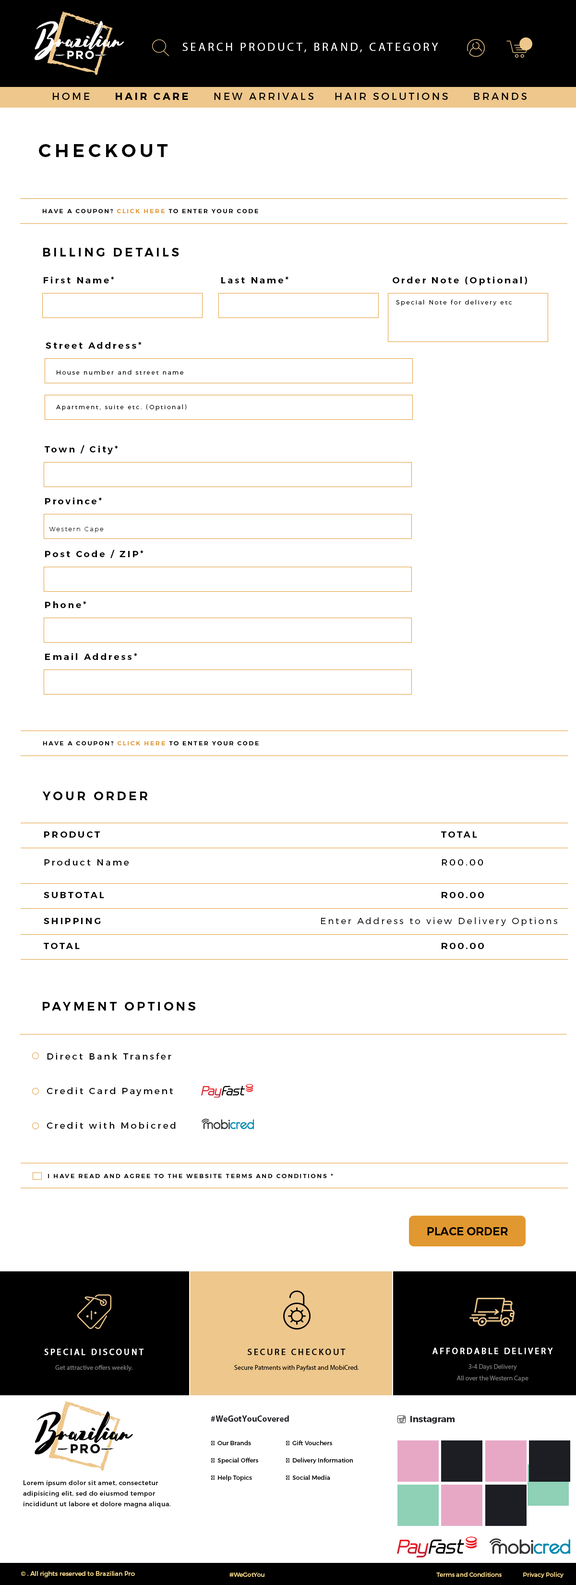
<style>
.page{position:relative;width:576px;height:1585px;background:#ffffff}
.page>*{position:absolute;margin:0}
.t1{font:11.6px "MyriadPro-Regular";letter-spacing:0.2em;color:#ffffff;text-transform:uppercase}
.t2{font:10px "Montserrat-Regular";letter-spacing:0.2em;color:#000000;text-transform:uppercase}
.t3{font:10px "Montserrat-Bold";letter-spacing:0.2em;color:#000000;text-transform:uppercase}
.t4{font:18.2px "Montserrat-SemiBold";letter-spacing:0.2em;color:#000000;text-transform:uppercase}
.t5{font:6px "Montserrat-SemiBold";letter-spacing:0.2em;color:#000000;text-transform:uppercase}
.t6{font:6px "Montserrat-SemiBold";letter-spacing:0.2em;color:#e19830;text-transform:uppercase}
.t7{font:12px "Montserrat-SemiBold";letter-spacing:0.2em;color:#000000;text-transform:uppercase}
.t8{font:9px "Montserrat-SemiBold";letter-spacing:0.2em;color:#000000}
.t9{font:9px "Montserrat-SemiBold";letter-spacing:0.2em;color:#000000;text-transform:uppercase}
.t10{font:6px "Montserrat-Light";letter-spacing:0.2em;color:#000000}
.t11{font:6px "Montserrat-UltraLight";letter-spacing:0.2em;color:#000000}
.t12{font:9px "Montserrat-Regular";letter-spacing:0.2em;color:#000000}
.t13{font:9px "Montserrat-Light";letter-spacing:0.2em;color:#000000}
.t14{font:9px/11.5px "Montserrat-Regular";letter-spacing:0.2em;color:#000000}
.t15{font:11.1px "Montserrat-SemiBold";color:#000000;text-transform:uppercase}
.t16{font:8.6px "MyriadPro-Regular";letter-spacing:0.2em;color:#ffffff;font-weight:bold}
.t17{font:8.6px "MyriadPro-Regular";letter-spacing:0.2em;color:#000000;font-weight:bold}
.t18{font:6.7px "MyriadPro-Regular";color:#767676}
.t19{font:6.7px "MyriadPro-Regular";color:#000000}
.t20{font:6.7px/11.5px "MyriadPro-Regular";color:#767676}
.t21{font:8.6px "MyriadPro-Bold";color:#1d1e24}
.t22{font:8.6px "Montserrat-Bold";color:#1d1e24}
.t23{font:6.2px/10.6px "Montserrat-Regular";letter-spacing:0.04em;color:#000000}
.t24{font:6.2px "Montserrat-Regular";color:#f5d78a}
.t25{font:6px "Montserrat-Regular";color:#f5d78a}
</style>
<div class="page">
<p class="t1" style="left:182px;top:43px;width:256px;height:9px">Search product, brand, category</p>
<p class="t2" style="left:53px;top:93px;width:474px;height:7px">Home     <span class="t3">hair care</span>     new arrivals    hair solutions     brands</p>
<p class="t4" style="left:39px;top:144px;width:129px;height:13px">checkout</p>
<p class="t5" style="left:42px;top:209px;width:216px;height:4px">Have a coupon? <span class="t6">Click here</span> to enter your code</p>
<p class="t7" style="left:43px;top:248px;width:136px;height:8px">BILLING DETAILS</p>
<p class="t8" style="left:44px;top:276px;width:70px;height:7px">First Name<span class="t9">*</span></p>
<p class="t8" style="left:221px;top:276px;width:68px;height:7px">Last Name*</p>
<p class="t8" style="left:393px;top:276px;width:134px;height:9px">Order Note (Optional)</p>
<p class="t10" style="left:396px;top:300px;width:116px;height:6px">Special Note for delivery etc</p>
<p class="t8" style="left:46px;top:341px;width:96px;height:8px">Street Address*</p>
<p class="t10" style="left:57px;top:370px;width:126px;height:5px">House number and street name</p>
<p class="t10" style="left:56px;top:404px;width:131px;height:7px">Apartment, suite etc. (Optional)</p>
<p class="t8" style="left:45px;top:445px;width:73px;height:9px">Town / City*</p>
<p class="t8" style="left:45px;top:497px;width:57px;height:7px">Province*</p>
<p class="t11" style="left:49px;top:527px;width:55px;height:6px">Western Cape</p>
<p class="t8" style="left:45px;top:549px;width:99px;height:9px">Post Code / ZIP*</p>
<p class="t8" style="left:45px;top:601px;width:41px;height:7px">Phone*</p>
<p class="t8" style="left:45px;top:653px;width:92px;height:7px">Email Address*</p>
<p class="t5" style="left:43px;top:741px;width:216px;height:4px">Have a coupon? <span class="t6">Click here</span> to enter your code</p>
<p class="t7" style="left:42px;top:791px;width:106px;height:9px">YOUR ORDER</p>
<p class="t8" style="left:44px;top:831px;width:433px;height:6px">PRODUCT                    TOTAL</p>
<p class="t12" style="left:44px;top:859px;width:440px;height:6px">Product Name                  R00.00</p>
<p class="t8" style="left:44px;top:892px;width:440px;height:6px">SUBTOTAL                    R00.00</p>
<p class="t13" style="left:44px;top:917px;width:514px;height:9px"><span class="t8">SHIPPING             </span>Enter Address to view Delivery Options</p>
<p class="t8" style="left:44px;top:943px;width:440px;height:6px">TOTAL                     R00.00</p>
<p class="t7" style="left:43px;top:1002px;width:152px;height:8px">payment options</p>
<p class="t14" style="left:47px;top:1053px;width:129px;height:75px">Direct Bank Transfer<br><br><br>Credit Card Payment<br><br><br>Credit with Mobicred</p>
<p class="t5" style="left:48px;top:1173px;width:285px;height:5px">I have read and agree to the website terms and conditions *</p>
<p class="t15" style="left:427px;top:1227px;width:81px;height:8px">PLACE ORDER</p>
<p class="t16" style="left:44px;top:1348px;width:100px;height:7px">SPECIAL DISCOUNT</p>
<p class="t17" style="left:247px;top:1348px;width:99px;height:7px">SECURE CHECKOUT</p>
<p class="t16" style="left:433px;top:1347px;width:120px;height:7px">AFFORDABLE DELIVERY</p>
<p class="t18" style="left:55px;top:1365px;width:78px;height:6px">Get attractive offers weekly.</p>
<p class="t19" style="left:234px;top:1365px;width:125px;height:6px">Secure Patments with Payfast and MobiCred.</p>
<p class="t20" style="left:457px;top:1364px;width:72px;height:18px;text-align:center">3-4 Days Delivery<br>All over the Western Cape</p>
<p class="t21" style="left:211px;top:1415px;width:78px;height:6px">#WeGotYouCovered</p>
<p class="t22" style="left:411px;top:1416px;width:44px;height:7px">Instagram</p>
<p class="t23" style="left:23px;top:1480px;width:147px;height:27px">Lorem ipsum dolor sit amet, consectetur adipisicing elit, sed do eiusmod tempor incididunt ut labore et dolore magna aliqua.</p>
<p class="t24" style="left:21px;top:1571px;width:114px;height:6px">© . All rights reserved to Brazilian Pro</p>
<p class="t25" style="left:230px;top:1572px;width:334px;height:5px">#WeGotYou          Terms and Conditions  Privacy Policy</p>
</div>
